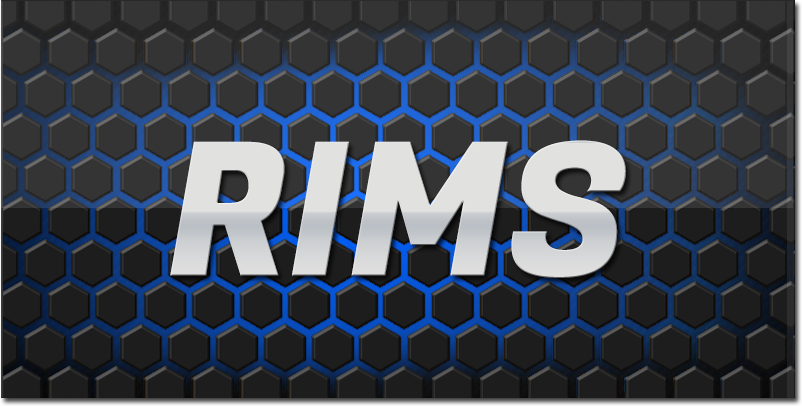
<style>
.page{position:relative;width:802px;height:406px;background:#343434}
.page>*{position:absolute;margin:0}
.t1{font:185.2px "FugazOne-Regular";color:#dfdfdf}
</style>
<div class="page">
<p class="t1" style="left:170px;top:140px;width:456px;height:138px">RIMS</p>
</div>
